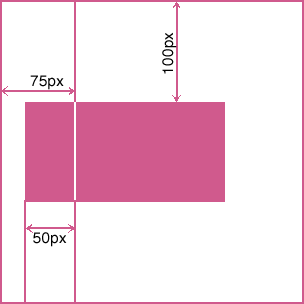
<style>
.page{position:relative;width:304px;height:304px;background:#ffffff}
.page>*{position:absolute;margin:0}
.t1{font:15px "Helvetica";letter-spacing:0.025em;color:#000000}
</style>
<div class="page">
<p class="t1" style="left:162px;top:32px;width:15px;height:42px;rotate:-90deg">100px</p>
<p class="t1" style="left:30px;top:75px;width:34px;height:15px">75px</p>
<p class="t1" style="left:33px;top:232px;width:34px;height:15px">50px</p>
</div>
